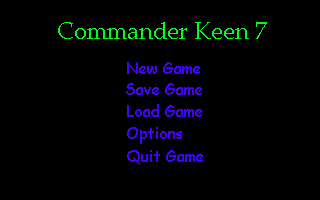
<style>
.page{position:relative;width:320px;height:200px;background:#000000}
.page>*{position:absolute;margin:0}
.t1{font:24px "PalatinoLinotype-Roman";color:#00ff18}
.t2{font:16px "ComicSansMS";color:#4200ff}
</style>
<div class="page">
<p class="t1" style="left:58px;top:22px;width:209px;height:17px">Commander Keen 7</p>
<p class="t2" style="left:127px;top:62px;width:73px;height:12px">New Game</p>
<p class="t2" style="left:126px;top:83px;width:76px;height:12px">Save Game</p>
<p class="t2" style="left:127px;top:104px;width:75px;height:13px">Load Game</p>
<p class="t2" style="left:127px;top:127px;width:55px;height:17px">Options</p>
<p class="t2" style="left:127px;top:150px;width:76px;height:15px">Quit Game</p>
</div>
